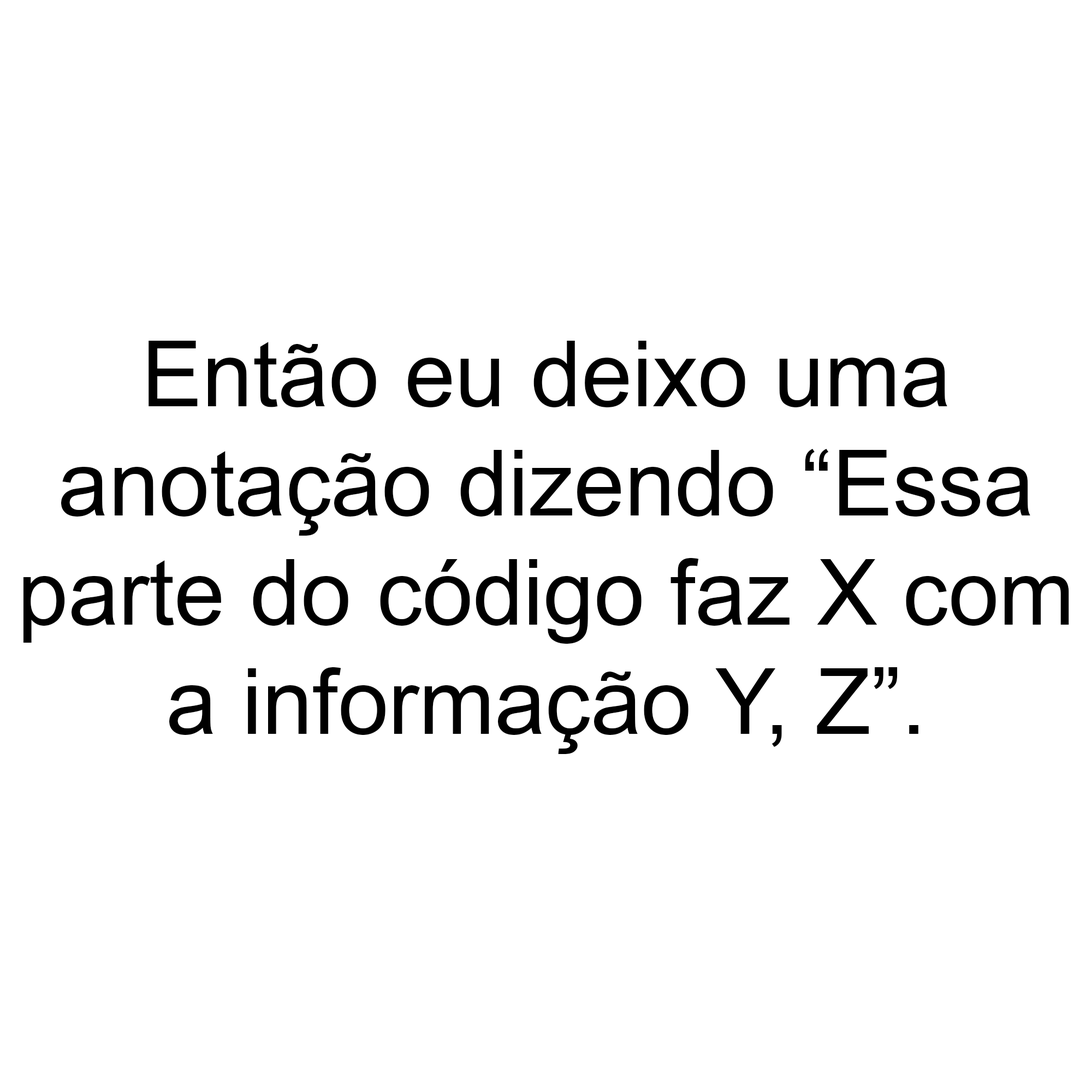
<style>
.page{position:relative;width:1092px;height:1092px;background:#ffffff}
.page>*{position:absolute;margin:0}
.t1{font:91px "ArialMT";color:#000000}
</style>
<div class="page">
<p class="t1" style="left:23px;top:341px;width:1046px;height:413px;text-align:center">Então eu deixo uma<br>anotação dizendo “Essa<br>parte do código faz X com<br>a informação Y, Z”.</p>
</div>
